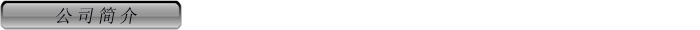
<style>
.page{position:relative;width:700px;height:30px;background:#ffffff}
.page>*{position:absolute;margin:0}
.t1{font:18px "SimSun";letter-spacing:0.2em;color:#010209;font-style:italic}
</style>
<div class="page">
<p class="t1" style="left:56px;top:7px;width:81px;height:17px">公司简介</p>
</div>
